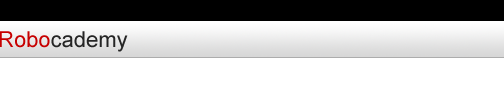
<style>
.page{position:relative;width:504px;height:105px;background:#ffffff}
.page>*{position:absolute;margin:0}
.t1{font:22px "ArialMT";color:#252525}
.t2{font:22px "ArialMT";color:#c70000}
</style>
<div class="page">
<p class="t1" style="left:0px;top:31px;width:128px;height:21px"><span class="t2">Robo</span>cademy</p>
</div>
